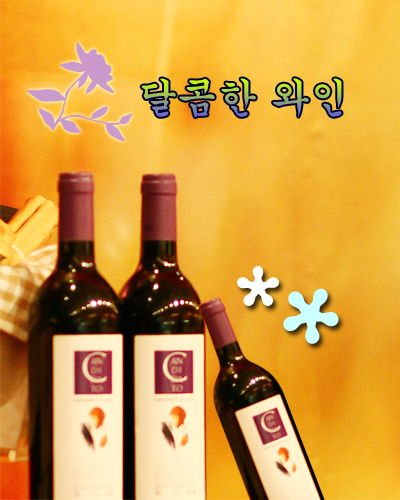
<style>
.page{position:relative;width:400px;height:500px}
.page>*{position:absolute;margin:0}
.t1{font:40px "Gungsuh"}
</style>
<div class="page">
<p class="t1" style="left:141px;top:78px;width:201px;height:40px">달콤한 와인</p>
</div>
